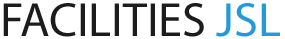
<style>
.page{position:relative;width:285px;height:39px;background:#ffffff}
.page>*{position:absolute;margin:0}
.t1{font:48.3px "MyriadPro-Regular";color:#1c1c1c}
.t2{font:48.3px "MyriadPro-Regular";color:#229bd9}
</style>
<div class="page">
<p class="t1" style="left:3px;top:3px;width:277px;height:34px">FACILITIES <span class="t2">JSL</span></p>
</div>
